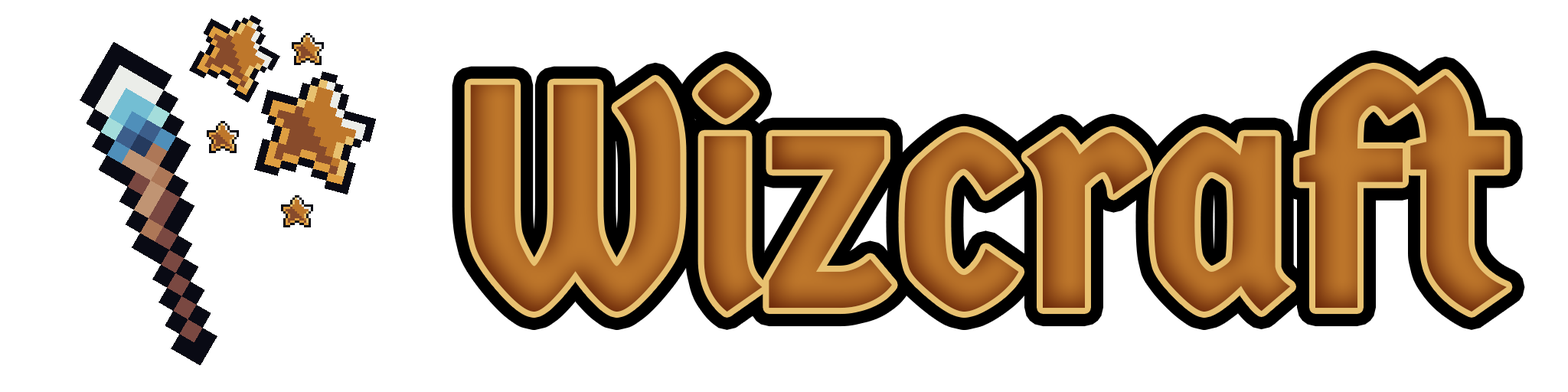
<style>
.page{position:relative;width:1568px;height:392px;background:#ffffff}
.page>*{position:absolute;margin:0}
.t1{font:318.7px "GermaniaOne-Regular";color:#be772b}
</style>
<div class="page">
<p class="t1" style="left:470px;top:69px;width:1037px;height:243px">Wizcraft</p>
</div>
